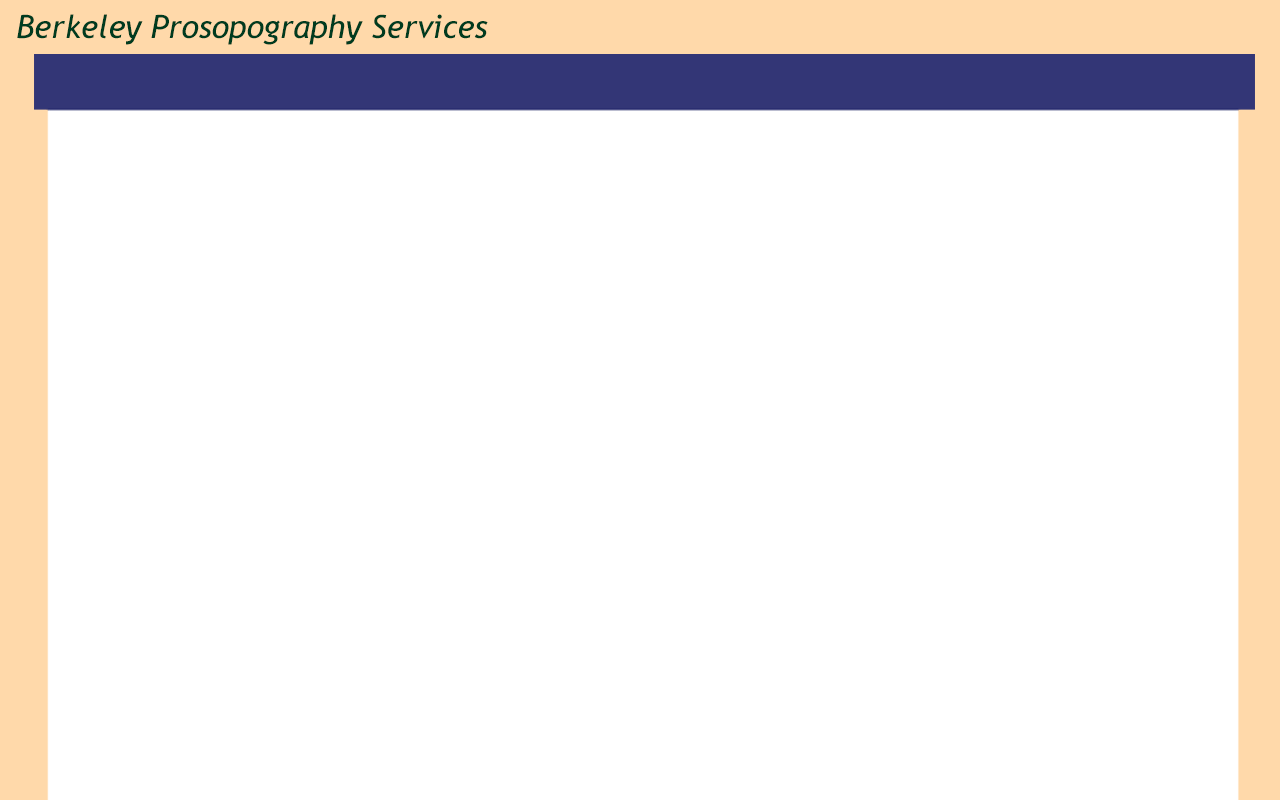
<style>
.page{position:relative;width:1280px;height:800px;background:#ffffff}
.page>*{position:absolute;margin:0}
.t1{font:32px "TrebuchetMS-Italic";color:#003b1f}
</style>
<div class="page">
<p class="t1" style="left:17px;top:14px;width:471px;height:31px">Berkeley Prosopography Services</p>
</div>
